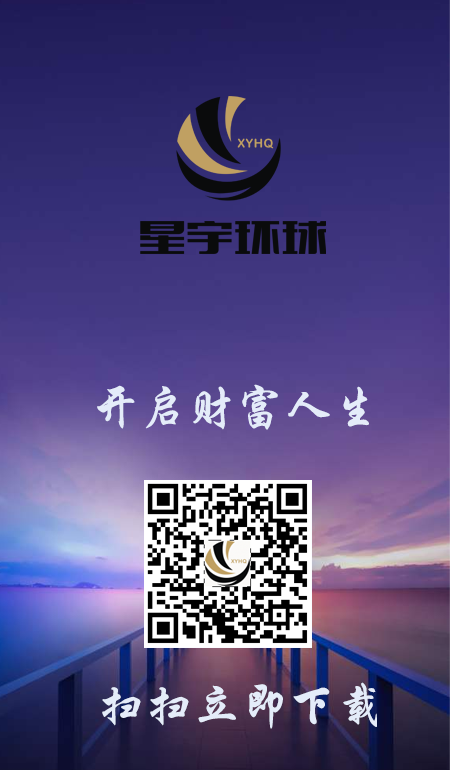
<style>
.page{position:relative;width:450px;height:770px}
.page>*{position:absolute;margin:0}
.t1{font:48px "STXingkai";color:#e4ecf9;text-transform:uppercase}
</style>
<div class="page">
<p class="t1" style="left:97px;top:384px;width:272px;height:46px">开启财富人生</p>
<p class="t1" style="left:102px;top:682px;width:275px;height:47px">扫扫立即下载</p>
</div>
